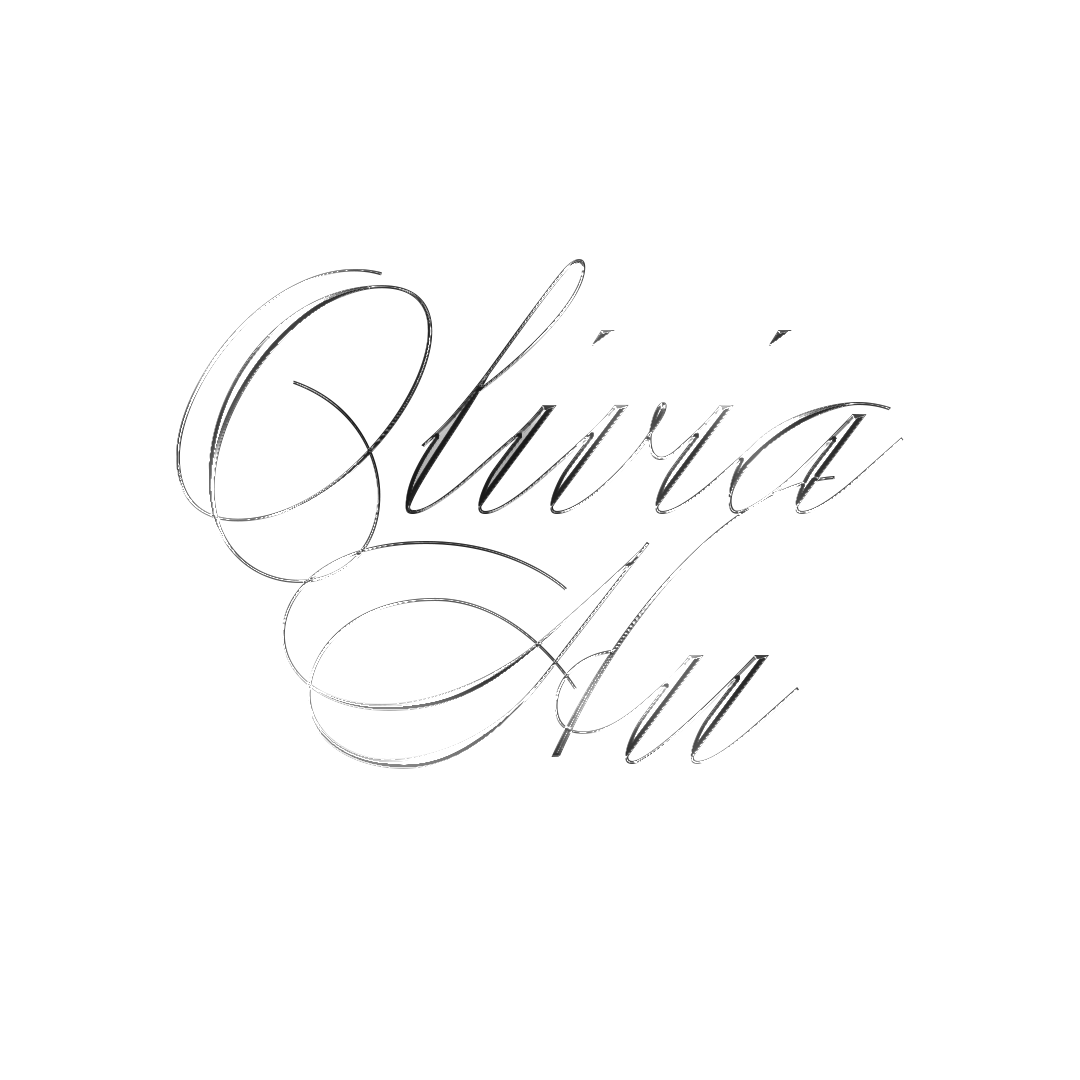
<style>
.page{position:relative;width:1080px;height:1080px;background:#ffffff}
.page>*{position:absolute;margin:0}
.t1{font:300px "Compendium"}
</style>
<div class="page">
<p class="t1" style="left:176px;top:259px;width:728px;height:510px">Olivia Hu</p>
</div>
